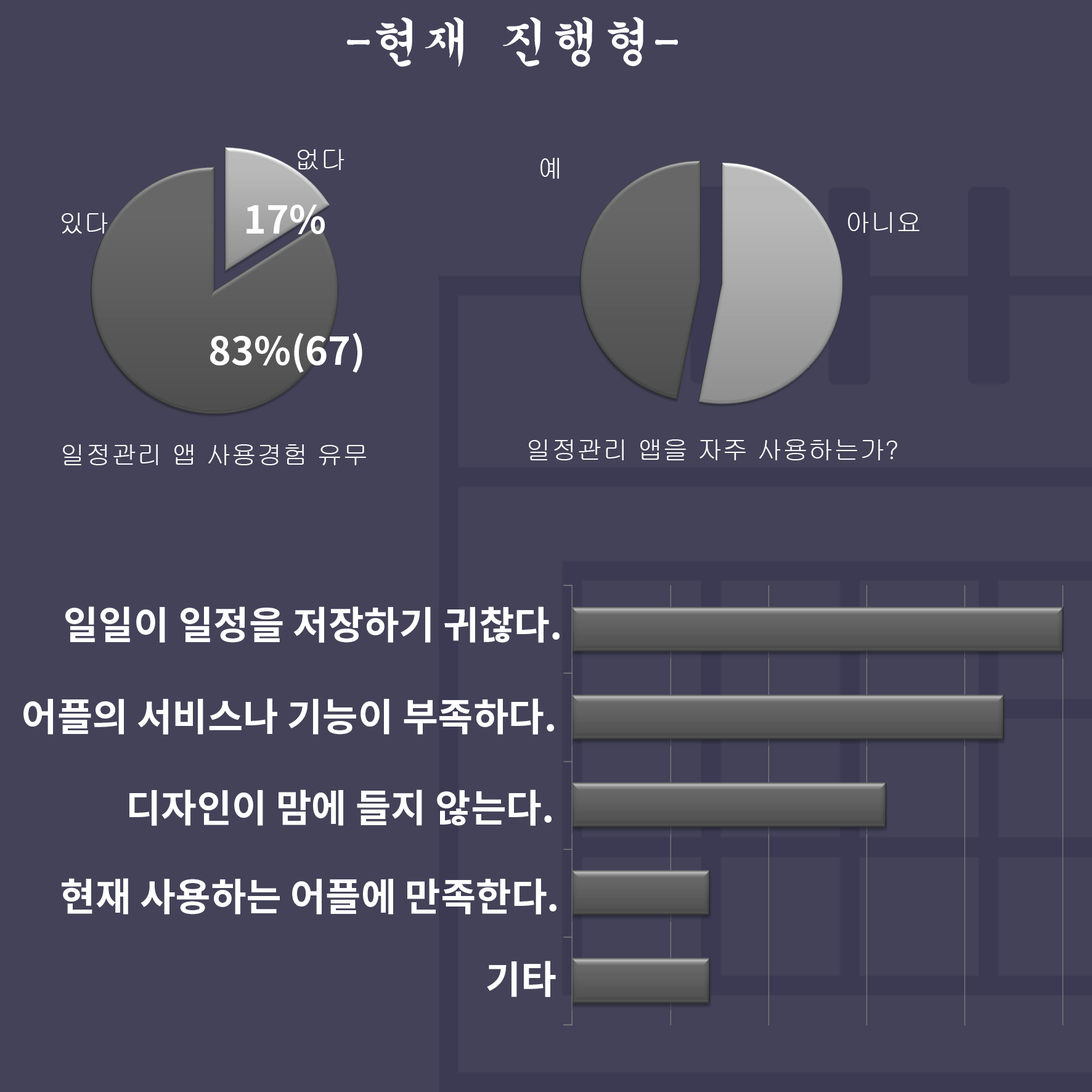
<style>
.page{position:relative;width:1092px;height:1092px;background:#434258}
.page>*{position:absolute;margin:0}
.t1{font:51.4px "GungsuhChe";color:#ffffff}
.t2{font:25.7px "Gulim";color:#ffffff}
.t3{font:38.5px "NotoSansCJKkr-Bold";color:#ffffff}
</style>
<div class="page">
<p class="t1" style="left:347px;top:17px;width:331px;height:50px">-현재 진행형-</p>
<p class="t2" style="left:298px;top:149px;width:46px;height:21px">없다</p>
<p class="t2" style="left:540px;top:158px;width:19px;height:21px">예</p>
<p class="t3" style="left:246px;top:205px;width:79px;height:29px">17%</p>
<p class="t2" style="left:62px;top:213px;width:46px;height:21px">있다</p>
<p class="t2" style="left:848px;top:212px;width:71px;height:21px">아니요</p>
<p class="t3" style="left:210px;top:333px;width:152px;height:40px">83%(67)</p>
<p class="t2" style="left:63px;top:444px;width:303px;height:21px">일정관리 앱 사용경험 유무</p>
<p class="t2" style="left:529px;top:439px;width:368px;height:21px">일정관리 앱을 자주 사용하는가?</p>
<p class="t3" style="left:65px;top:606px;width:495px;height:37px">일일이 일정을 저장하기 귀찮다.</p>
<p class="t3" style="left:23px;top:698px;width:531px;height:37px">어플의 서비스나 기능이 부족하다.</p>
<p class="t3" style="left:129px;top:789px;width:423px;height:37px">디자인이 맘에 들지 않는다.</p>
<p class="t3" style="left:62px;top:878px;width:494px;height:37px">현재 사용하는 어플에 만족한다.</p>
<p class="t3" style="left:487px;top:961px;width:69px;height:36px">기타</p>
</div>
